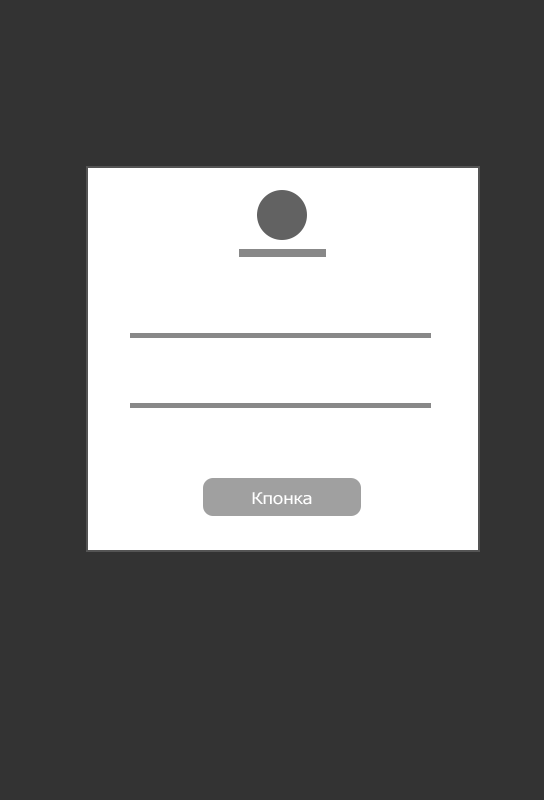
<style>
.page{position:relative;width:544px;height:800px;background:#333333}
.page>*{position:absolute;margin:0}
.t1{font:16px "Tahoma";color:#ffffff;scale:1.16 1}
</style>
<div class="page">
<p class="t1" style="left:252px;top:492px;width:60px;height:13px">Кпонка</p>
</div>
